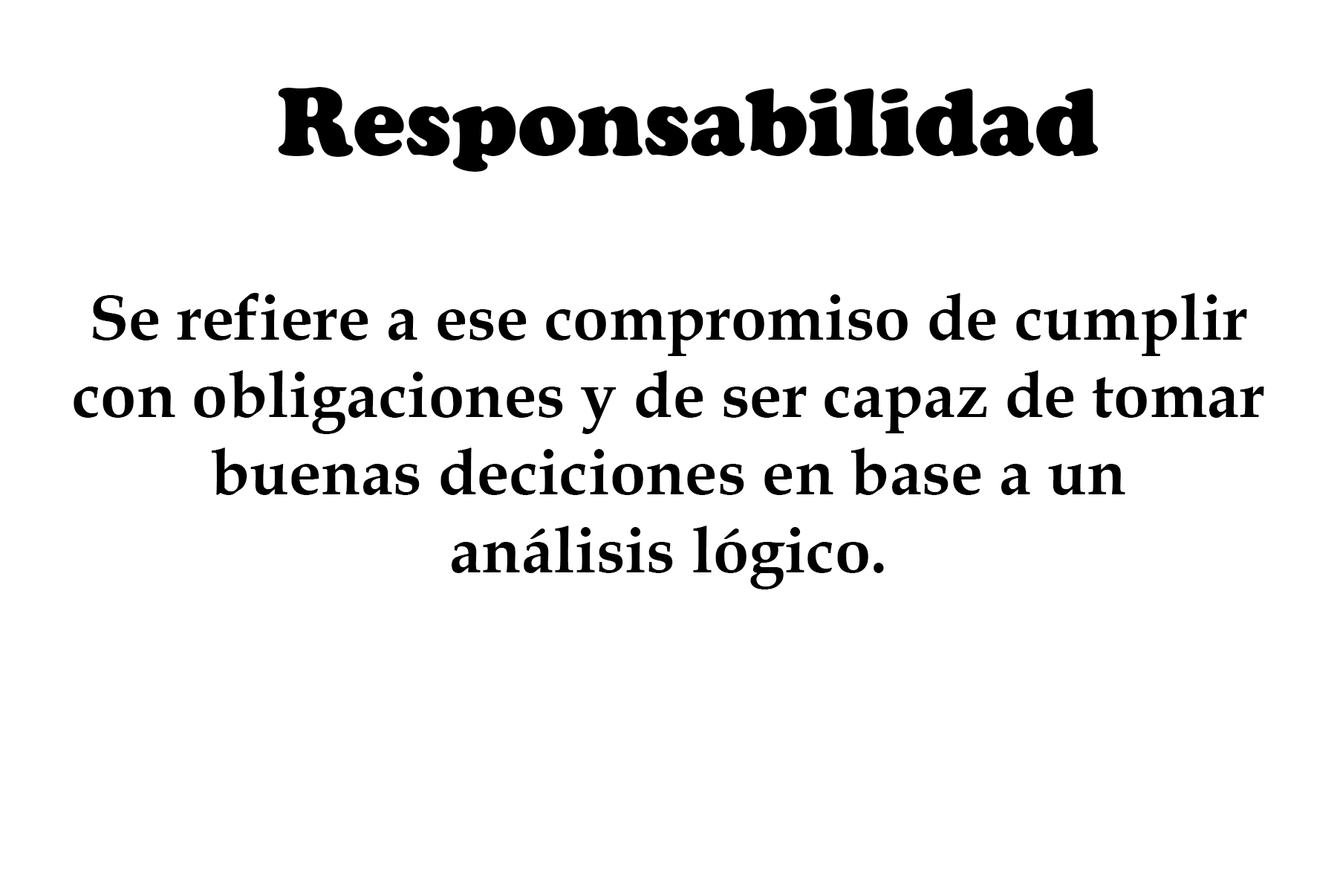
<style>
.page{position:relative;width:1337px;height:892px;background:#ffffff}
.page>*{position:absolute;margin:0}
.t1{font:98.7px "CooperBlack";color:#000000}
.t2{font:64.6px "BookAntiqua-Bold";color:#000000}
</style>
<div class="page">
<p class="t1" style="left:278px;top:87px;width:821px;height:85px">Responsabilidad</p>
<p class="t2" style="left:74px;top:293px;width:1191px;height:296px;text-align:center">Se refiere a ese compromiso de cumplir<br>con obligaciones y de ser capaz de tomar<br>buenas deciciones en base a un<br>análisis lógico.</p>
</div>
